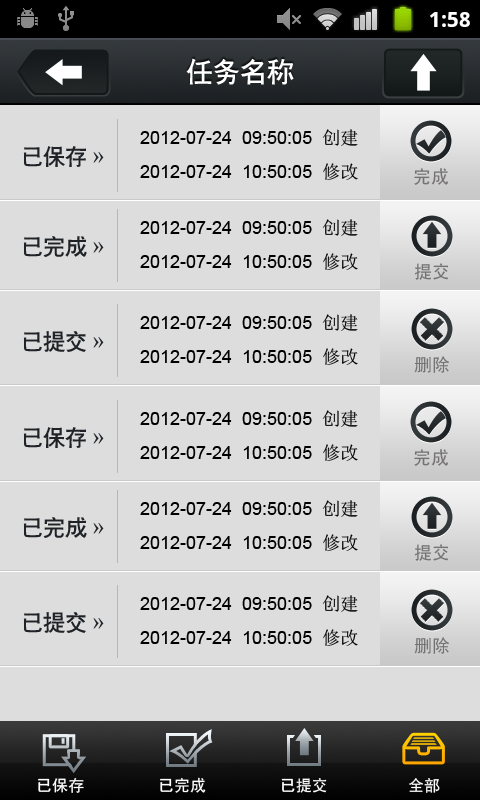
<style>
.page{position:relative;width:480px;height:800px;background:#dddddd}
.page>*{position:absolute;margin:0}
.t1{font:27px "CTCuHeiSJ";color:#ffffff}
.t2{font:18px "ArialMT";color:#000000}
.t3{font:18px "SimSun";color:#000000}
.t4{font:22px "CTCuHeiSJ";color:#1f2327}
.t5{font:22px "SimSun";color:#1f2327}
.t6{font:18px "SimHei";color:#747272}
.t7{font:16px "SimHei";color:#ffffff}
</style>
<div class="page">
<p class="t1" style="left:186px;top:58px;width:108px;height:27px">任务名称</p>
<p class="t2" style="left:140px;top:129px;width:218px;height:17px">2012-07-24  09:50:05  <span class="t3">创建</span></p>
<p class="t4" style="left:23px;top:146px;width:81px;height:21px">已保存 <span class="t5">»</span></p>
<p class="t2" style="left:140px;top:163px;width:218px;height:17px">2012-07-24  10:50:05  <span class="t3">修改</span></p>
<p class="t6" style="left:414px;top:168px;width:34px;height:17px">完成</p>
<p class="t2" style="left:140px;top:219px;width:218px;height:17px">2012-07-24  09:50:05  <span class="t3">创建</span></p>
<p class="t4" style="left:23px;top:236px;width:81px;height:21px">已完成 <span class="t5">»</span></p>
<p class="t2" style="left:140px;top:253px;width:218px;height:17px">2012-07-24  10:50:05  <span class="t3">修改</span></p>
<p class="t6" style="left:414px;top:263px;width:35px;height:17px">提交</p>
<p class="t2" style="left:140px;top:314px;width:218px;height:17px">2012-07-24  09:50:05  <span class="t3">创建</span></p>
<p class="t4" style="left:23px;top:331px;width:81px;height:21px">已提交 <span class="t5">»</span></p>
<p class="t2" style="left:140px;top:348px;width:218px;height:17px">2012-07-24  10:50:05  <span class="t3">修改</span></p>
<p class="t6" style="left:414px;top:356px;width:35px;height:17px">删除</p>
<p class="t2" style="left:140px;top:410px;width:218px;height:17px">2012-07-24  09:50:05  <span class="t3">创建</span></p>
<p class="t4" style="left:23px;top:427px;width:81px;height:21px">已保存 <span class="t5">»</span></p>
<p class="t2" style="left:140px;top:444px;width:218px;height:17px">2012-07-24  10:50:05  <span class="t3">修改</span></p>
<p class="t6" style="left:414px;top:449px;width:34px;height:17px">完成</p>
<p class="t2" style="left:140px;top:500px;width:218px;height:17px">2012-07-24  09:50:05  <span class="t3">创建</span></p>
<p class="t4" style="left:23px;top:517px;width:81px;height:21px">已完成 <span class="t5">»</span></p>
<p class="t2" style="left:140px;top:534px;width:218px;height:17px">2012-07-24  10:50:05  <span class="t3">修改</span></p>
<p class="t6" style="left:414px;top:544px;width:35px;height:17px">提交</p>
<p class="t2" style="left:140px;top:595px;width:218px;height:17px">2012-07-24  09:50:05  <span class="t3">创建</span></p>
<p class="t4" style="left:23px;top:612px;width:81px;height:21px">已提交 <span class="t5">»</span></p>
<p class="t2" style="left:140px;top:629px;width:218px;height:17px">2012-07-24  10:50:05  <span class="t3">修改</span></p>
<p class="t6" style="left:414px;top:637px;width:35px;height:17px">删除</p>
<p class="t7" style="left:38px;top:778px;width:46px;height:15px">已保存</p>
<p class="t7" style="left:160px;top:777px;width:46px;height:16px">已完成</p>
<p class="t7" style="left:281px;top:778px;width:46px;height:15px">已提交</p>
<p class="t7" style="left:409px;top:778px;width:31px;height:15px">全部</p>
</div>
